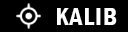
<style>
.page{position:relative;width:128px;height:32px;background:#000000}
.page>*{position:absolute;margin:0}
.t1{font:25px "FranklinGothic-DemiCond";letter-spacing:0.04em;color:#ffffff}
</style>
<div class="page">
<p class="t1" style="left:57px;top:8px;width:60px;height:17px">KALIB</p>
</div>
